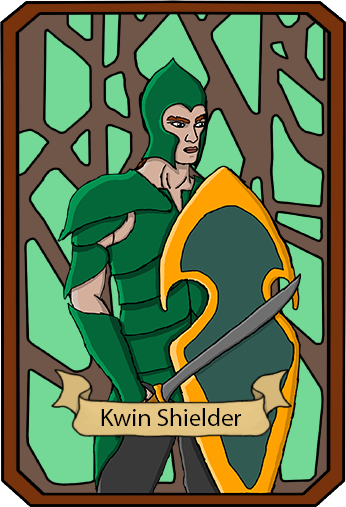
<style>
.page{position:relative;width:346px;height:507px}
.page>*{position:absolute;margin:0}
.t1{font:25px "MyriadPro-Regular";color:#000000}
</style>
<div class="page">
<p class="t1" style="left:101px;top:408px;width:140px;height:18px">Kwin Shielder</p>
</div>
